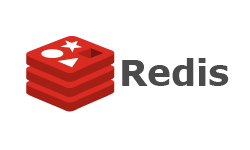
<style>
.page{position:relative;width:250px;height:150px;background:#ffffff}
.page>*{position:absolute;margin:0}
.t1{font:36px "Verdana-Bold";color:#4b4b4b}
</style>
<div class="page">
<p class="t1" style="left:122px;top:58px;width:107px;height:28px">Redis</p>
</div>
